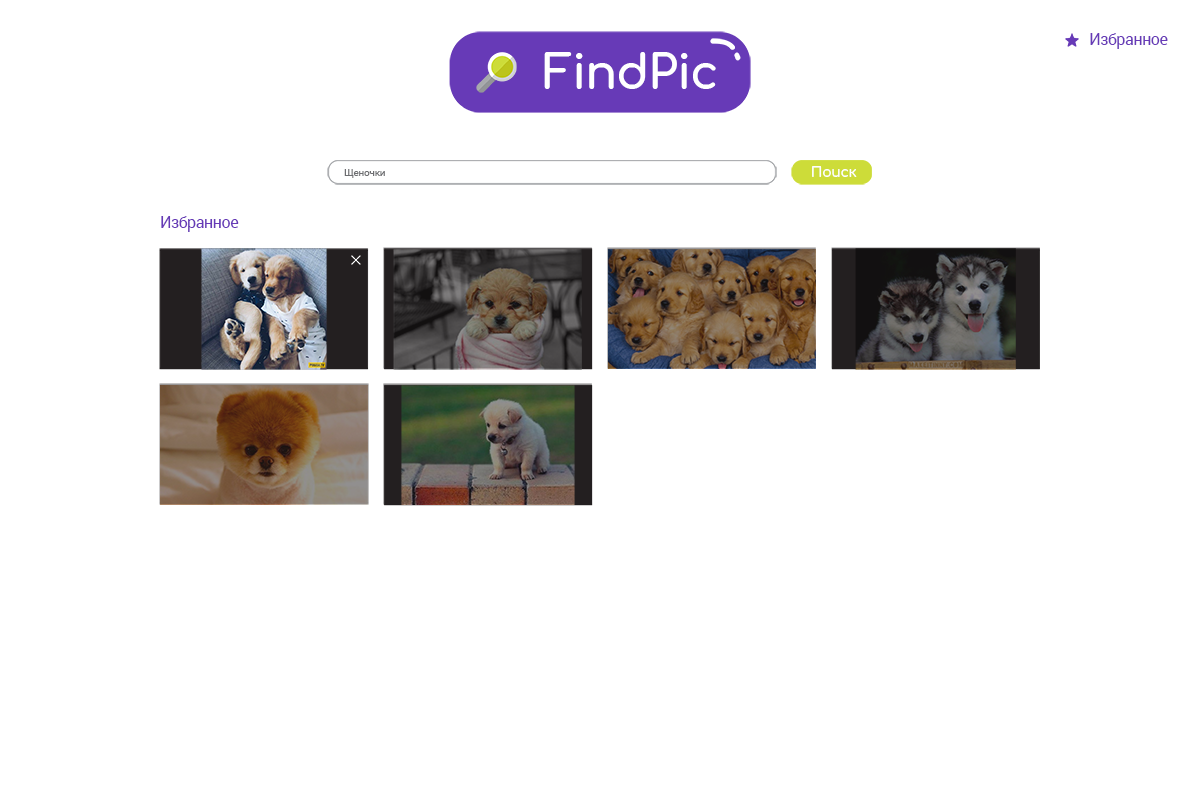
<style>
.page{position:relative;width:1200px;height:800px;background:#ffffff}
.page>*{position:absolute;margin:0}
.t1{font:16px "Roboto-Regular";letter-spacing:-0.025em;color:#673ab7}
.t2{font:10px "Roboto-Regular";letter-spacing:-0.025em;color:#6d6e71}
.t3{font:14px "Comfortaa-Bold";letter-spacing:-0.025em;color:#ffffff}
</style>
<div class="page">
<p class="t1" style="left:1090px;top:33px;width:78px;height:16px">Избранное</p>
<p class="t2" style="left:344px;top:169px;width:41px;height:9px">Щеночки</p>
<p class="t3" style="left:812px;top:166px;width:45px;height:11px">Поиск</p>
<p class="t1" style="left:161px;top:216px;width:78px;height:16px">Избранное</p>
</div>
